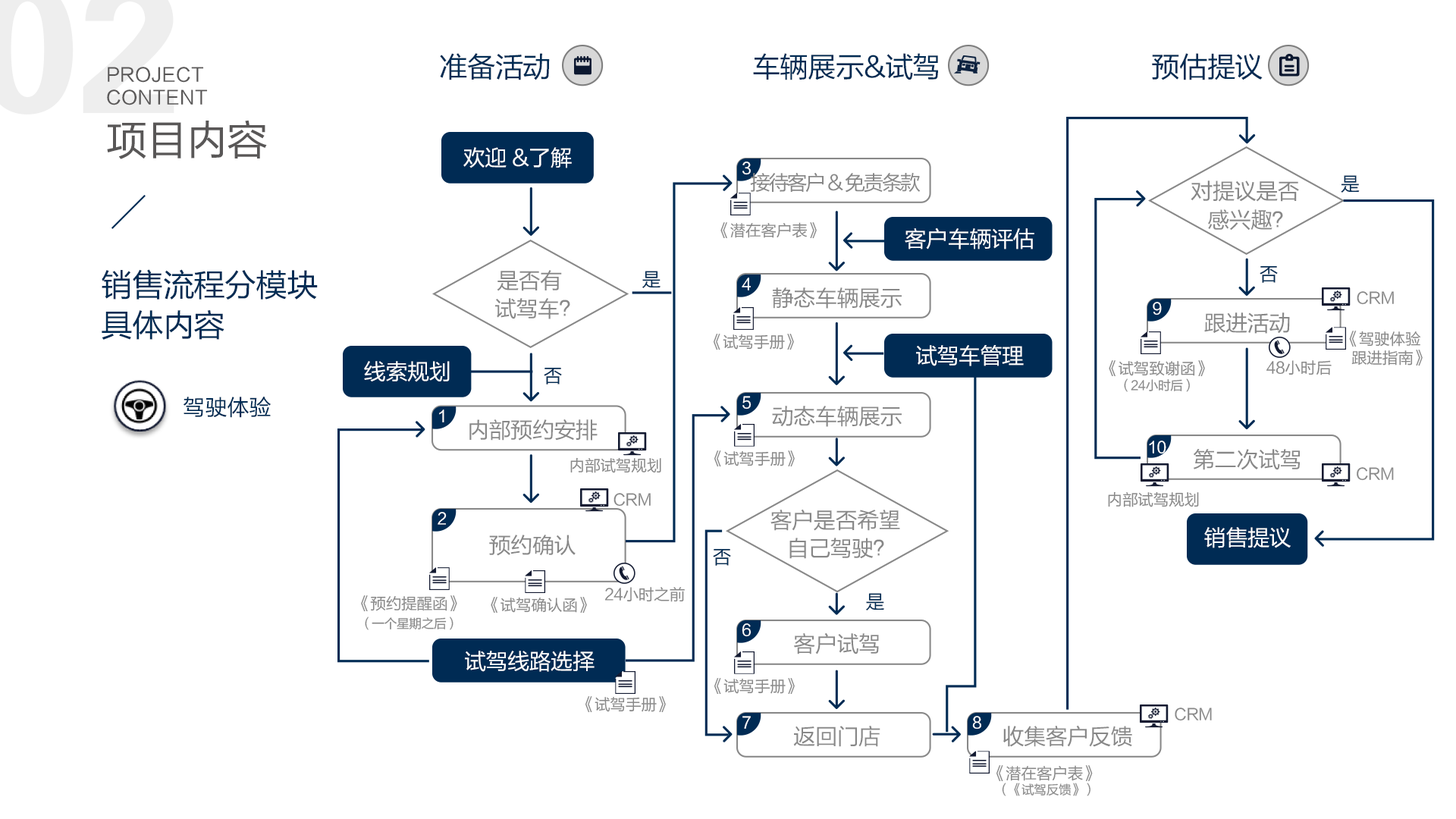
<style>
.page{position:relative;width:1456px;height:819px;background:#ffffff}
.page>*{position:absolute;margin:0}
.t1{font:28.4px "FZLTHJW--GB1-0";letter-spacing:-0.02em;color:#002c54}
.t2{font:18.8px "FZLTHJW--GB1-0";letter-spacing:0.02em;color:#595757}
.t3{font:41.1px "FZLTHJW--GB1-0";letter-spacing:-0.02em;color:#595757}
.t4{font:22.1px "FZLTHJW--GB1-0";letter-spacing:-0.02em;color:#ffffff}
.t5{font:15.8px "FZLTHJW--GB1-0";letter-spacing:-0.02em;color:#ffffff}
.t6{font:20.5px "FZLTHJW--GB1-0";letter-spacing:-0.1em;color:#888888}
.t7{font:22.1px/28.4px "FZLTHJW--GB1-0";letter-spacing:-0.02em;color:#888888}
.t8{font:19px "FZLTHJW--GB1-0";letter-spacing:-0.02em;color:#002c54}
.t9{font:15.8px "FZLTHJW--GB1-0";letter-spacing:-0.02em;color:#888888}
.t10{font:31.6px/40.1px "FZLTHJW--GB1-0";letter-spacing:-0.02em;color:#002c54}
.t11{font:22.1px "FZLTHJW--GB1-0";letter-spacing:-0.02em;color:#888888}
.t12{font:15.8px/19px "FZLTHJW--GB1-0";letter-spacing:-0.02em;color:#888888}
.t13{font:15.8px/15.8px "FZLTHJW--GB1-0";letter-spacing:-0.02em;color:#888888}
.t14{font:12.6px/15.8px "FZLTHJW--GB1-0";letter-spacing:-0.02em;color:#888888}
.t15{font:22.1px "FZLTHJW--GB1-0";color:#002c54}
.t16{font:12.6px/19px "FZLTHJW--GB1-0";letter-spacing:-0.02em;color:#888888}
</style>
<div class="page">
<p class="t1" style="left:440px;top:53px;width:110px;height:27px">准备活动</p>
<p class="t1" style="left:753px;top:53px;width:185px;height:27px">车辆展示&amp;试驾</p>
<p class="t1" style="left:1152px;top:53px;width:111px;height:27px">预估提议</p>
<p class="t2" style="left:107px;top:67px;width:101px;height:38px">PROJECT <br>CONTENT</p>
<p class="t3" style="left:107px;top:120px;width:160px;height:39px">项目内容</p>
<p class="t4" style="left:463px;top:147px;width:109px;height:21px">欢迎 &amp;了解</p>
<p class="t5" style="left:742px;top:162px;width:9px;height:13px">3</p>
<p class="t6" style="left:750px;top:172px;width:171px;height:21px">接待客户 &amp; 免责条款</p>
<p class="t7" style="left:1191px;top:180px;width:108px;height:51px;text-align:center">对提议是否<br>  感兴趣？</p>
<p class="t8" style="left:1341px;top:175px;width:19px;height:18px">是</p>
<p class="t9" style="left:720px;top:222px;width:97px;height:17px">《潜在客户表》</p>
<p class="t4" style="left:905px;top:227px;width:129px;height:22px">客户车辆评估</p>
<p class="t10" style="left:102px;top:269px;width:216px;height:71px">销售流程分模块<br>具体内容</p>
<p class="t7" style="left:495px;top:270px;width:75px;height:49px;text-align:center">是否有<br>   试驾车？</p>
<p class="t8" style="left:1260px;top:265px;width:18px;height:18px">否</p>
<p class="t8" style="left:642px;top:271px;width:18px;height:17px">是</p>
<p class="t5" style="left:742px;top:278px;width:9px;height:12px">4</p>
<p class="t11" style="left:772px;top:287px;width:130px;height:22px">静态车辆展示</p>
<p class="t9" style="left:1357px;top:291px;width:37px;height:14px">CRM</p>
<p class="t5" style="left:1153px;top:302px;width:9px;height:13px">9</p>
<p class="t11" style="left:1204px;top:312px;width:86px;height:22px">跟进活动</p>
<p class="t9" style="left:714px;top:334px;width:80px;height:16px">《试驾手册》</p>
<p class="t12" style="left:1349px;top:331px;width:74px;height:35px;text-align:center">《驾驶体验<br>    跟进指南》</p>
<p class="t4" style="left:916px;top:345px;width:108px;height:21px">试驾车管理</p>
<p class="t4" style="left:364px;top:361px;width:86px;height:21px">线索规划</p>
<p class="t13" style="left:1109px;top:360px;width:96px;height:32px;text-align:center">《试驾致谢函》<br><span class="t14">（24小时后）</span></p>
<p class="t9" style="left:1266px;top:360px;width:66px;height:15px">48小时后</p>
<p class="t8" style="left:544px;top:367px;width:18px;height:17px">否</p>
<p class="t15" style="left:183px;top:397px;width:88px;height:21px">驾驶体验</p>
<p class="t5" style="left:742px;top:396px;width:9px;height:13px">5</p>
<p class="t5" style="left:439px;top:409px;width:5px;height:13px">1</p>
<p class="t11" style="left:772px;top:406px;width:130px;height:21px">动态车辆展示</p>
<p class="t11" style="left:469px;top:419px;width:129px;height:22px">内部预约安排</p>
<p class="t5" style="left:1149px;top:441px;width:17px;height:13px">10</p>
<p class="t11" style="left:1194px;top:449px;width:106px;height:21px">第二次试驾</p>
<p class="t9" style="left:570px;top:457px;width:91px;height:16px">内部试驾规划</p>
<p class="t9" style="left:714px;top:450px;width:81px;height:17px">《试驾手册》</p>
<p class="t9" style="left:1357px;top:467px;width:37px;height:14px">CRM</p>
<p class="t9" style="left:613px;top:493px;width:38px;height:14px">CRM</p>
<p class="t9" style="left:1108px;top:491px;width:91px;height:16px">内部试驾规划</p>
<p class="t7" style="left:770px;top:509px;width:130px;height:50px;text-align:center">客户是否希望<br>  自己驾驶？</p>
<p class="t5" style="left:438px;top:512px;width:9px;height:13px">2</p>
<p class="t4" style="left:1204px;top:527px;width:87px;height:21px">销售提议</p>
<p class="t11" style="left:489px;top:535px;width:87px;height:21px">预约确认</p>
<p class="t8" style="left:713px;top:548px;width:18px;height:18px">否</p>
<p class="t9" style="left:605px;top:587px;width:80px;height:15px">24小时之前</p>
<p class="t8" style="left:866px;top:593px;width:18px;height:17px">是</p>
<p class="t16" style="left:361px;top:595px;width:96px;height:35px;text-align:center"><span class="t12">《预约提醒函》<br></span>（一个星期之后）</p>
<p class="t9" style="left:491px;top:597px;width:96px;height:16px">《试驾确认函》</p>
<p class="t5" style="left:742px;top:623px;width:9px;height:14px">6</p>
<p class="t11" style="left:794px;top:632px;width:85px;height:22px">客户试驾</p>
<p class="t4" style="left:465px;top:651px;width:130px;height:21px">试驾线路选择</p>
<p class="t9" style="left:714px;top:678px;width:81px;height:17px">《试驾手册》</p>
<p class="t9" style="left:585px;top:696px;width:81px;height:17px">《试驾手册》</p>
<p class="t9" style="left:1175px;top:708px;width:37px;height:13px">CRM</p>
<p class="t5" style="left:742px;top:716px;width:9px;height:13px">7</p>
<p class="t11" style="left:793px;top:726px;width:87px;height:21px">返回门店</p>
<p class="t5" style="left:972px;top:716px;width:9px;height:14px">8</p>
<p class="t11" style="left:1003px;top:725px;width:129px;height:22px">收集客户反馈</p>
<p class="t14" style="left:996px;top:765px;width:97px;height:31px;text-align:center"><span class="t13">《潜在客户表》 <br></span>（《试驾反馈》）</p>
</div>
